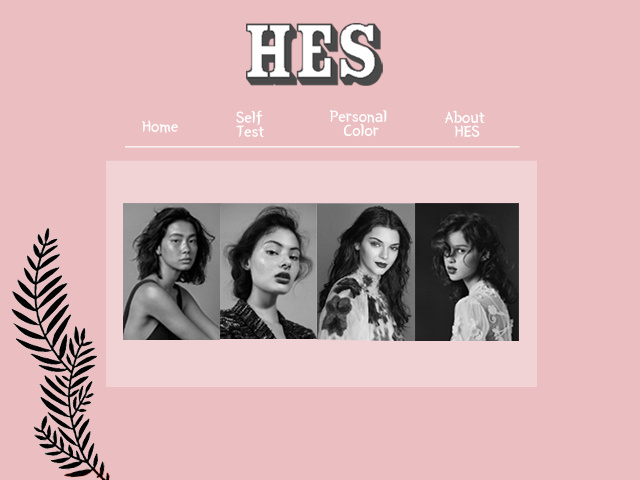
<style>
.page{position:relative;width:640px;height:480px;background:#ebbec1}
.page>*{position:absolute;margin:0}
.t1{font:16.9px/14px "BMYEONSUNG";color:#ffffff}
.t2{font:16.9px "BMYEONSUNG";color:#ffffff}
</style>
<div class="page">
<p class="t1" style="left:236px;top:110px;width:28px;height:27px">Self<br>Test</p>
<p class="t1" style="left:330px;top:110px;width:57px;height:27px;text-align:center">Personal <br>Color</p>
<p class="t1" style="left:444px;top:110px;width:41px;height:27px;text-align:center">About <br>HES</p>
<p class="t2" style="left:142px;top:120px;width:36px;height:13px">Home</p>
</div>
